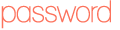
<style>
.page{position:relative;width:120px;height:30px;background:#ffffff}
.page>*{position:absolute;margin:0}
.t1{font:30px "Lane-Narrow";letter-spacing:-0.08em;color:#fc735d;font-weight:bold}
</style>
<div class="page">
<p class="t1" style="left:1px;top:0px;width:110px;height:29px">password</p>
</div>
